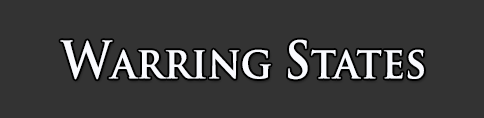
<style>
.page{position:relative;width:484px;height:118px;background:#333333}
.page>*{position:absolute;margin:0}
.t1{font:43.6px "TrajanPro-Bold";color:#f9fafe;scale:0.92 1}
.t2{font:50.1px "TrajanPro-Bold";color:#f9fafe;scale:0.92 1}
</style>
<div class="page">
<p class="t1" style="left:60px;top:39px;width:364px;height:41px"><span class="t2">W</span>arring <span class="t2">S</span>tates</p>
</div>
